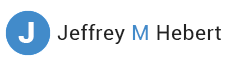
<style>
.page{position:relative;width:238px;height:62px;background:#ffffff}
.page>*{position:absolute;margin:0}
.t1{font:30px "Roboto-Black";letter-spacing:0.025em;color:#ffffff}
.t2{font:21px "Roboto-Regular";letter-spacing:0.025em;color:#222222}
.t3{font:21px "Roboto-Regular";letter-spacing:0.025em;color:#428bca}
</style>
<div class="page">
<p class="t1" style="left:18px;top:22px;width:16px;height:21px">J</p>
<p class="t2" style="left:57px;top:24px;width:164px;height:20px">Jeffrey <span class="t3">M</span> Hebert</p>
</div>
